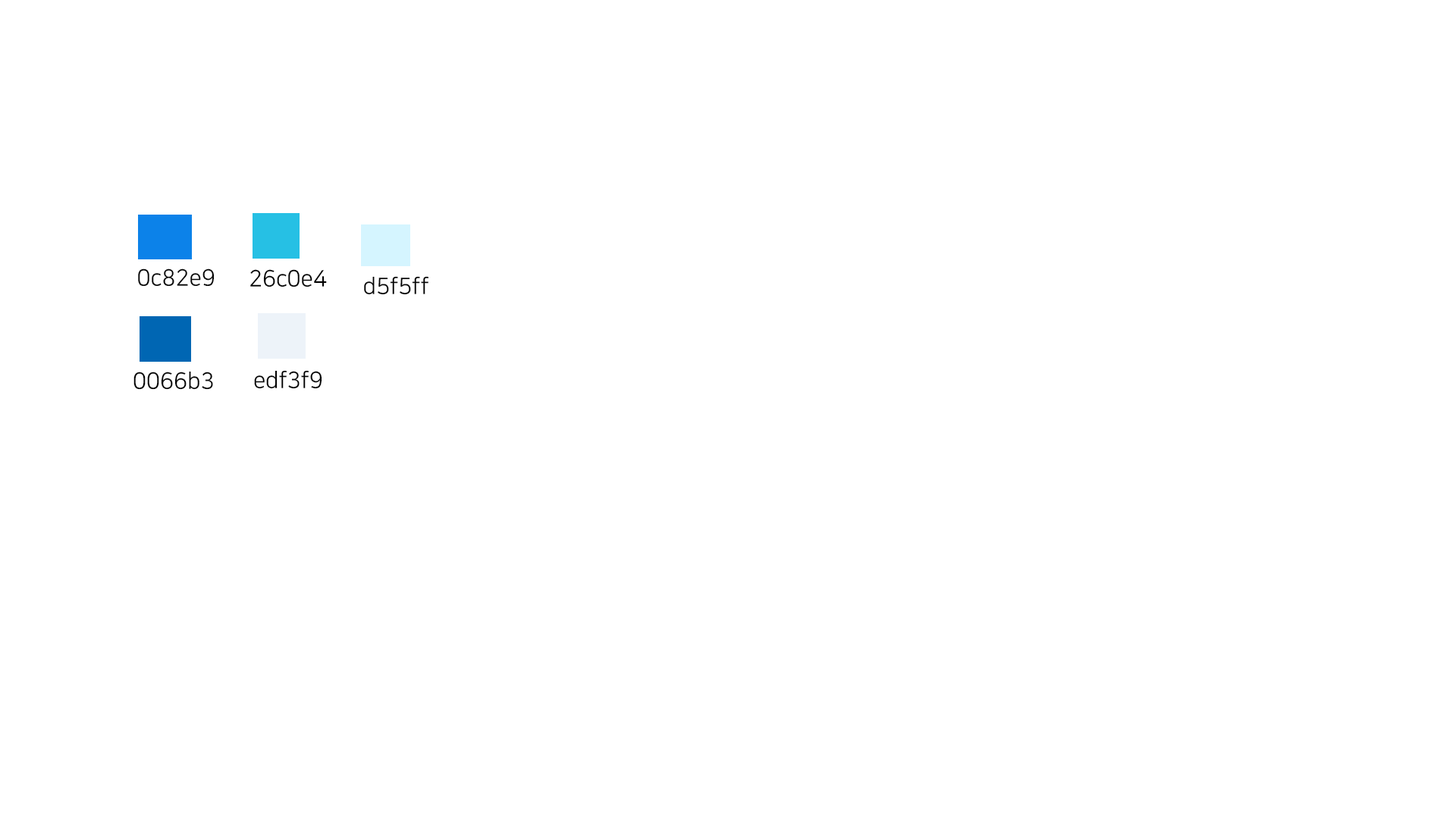
<style>
.page{position:relative;width:1456px;height:819px;background:#ffffff}
.page>*{position:absolute;margin:0}
.t1{font:22.7px "NanumSquareR";color:#050505}
.t2{font:22.7px "NanumSquareR";color:#000000}
</style>
<div class="page">
<p class="t1" style="left:138px;top:268px;width:77px;height:19px">0c82e9</p>
<p class="t2" style="left:250px;top:269px;width:77px;height:18px">26c0e4</p>
<p class="t2" style="left:364px;top:276px;width:64px;height:19px">d5f5ff</p>
<p class="t2" style="left:133px;top:371px;width:80px;height:19px">0066b3</p>
<p class="t2" style="left:254px;top:370px;width:68px;height:19px">edf3f9</p>
</div>
